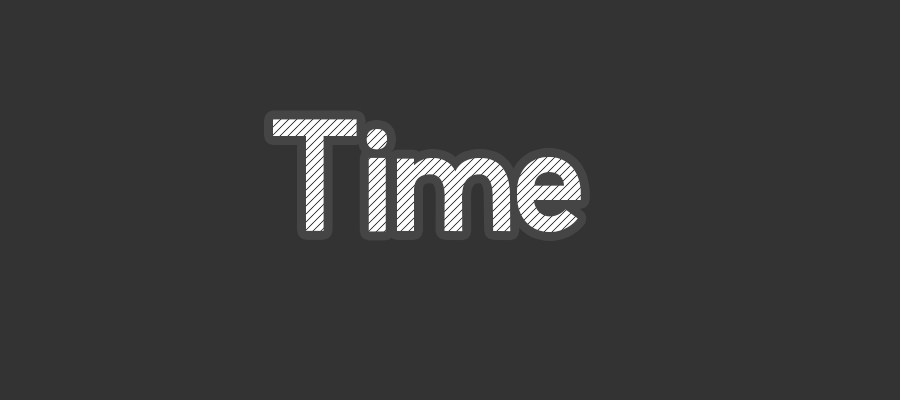
<style>
.page{position:relative;width:900px;height:400px;background:#333333}
.page>*{position:absolute;margin:0}
.t1{font:150px "PlutoniumSans-Regular";color:#ffffff}
</style>
<div class="page">
<p class="t1" style="left:273px;top:119px;width:308px;height:113px">Time</p>
</div>
